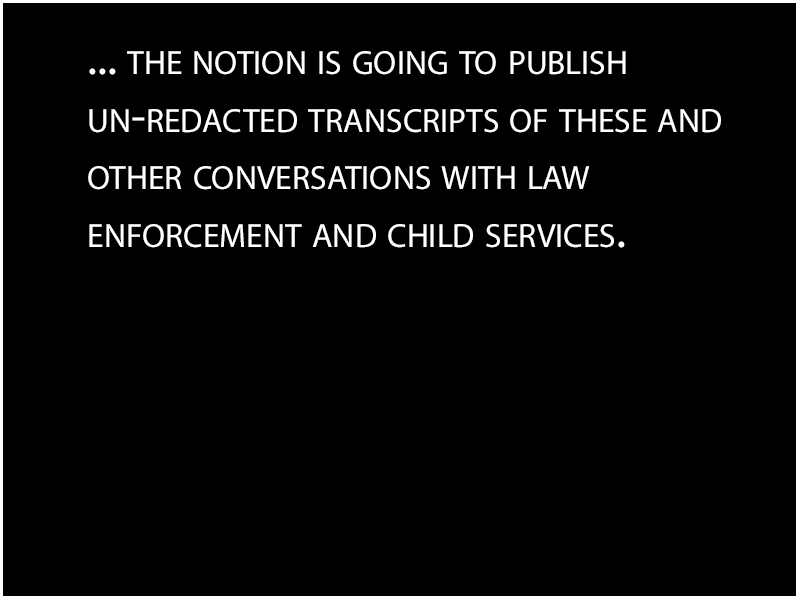
<style>
.page{position:relative;width:800px;height:600px;background:#000000}
.page>*{position:absolute;margin:0}
.t1{font:48px "MyriadPro-Regular";color:#ffffff;font-variant:small-caps}
</style>
<div class="page">
<p class="t1" style="left:88px;top:51px;width:633px;height:197px">... the notion is going to publish <br>un-redacted transcripts of these and<br>other conversations with law<br>enforcement and child services.</p>
</div>
